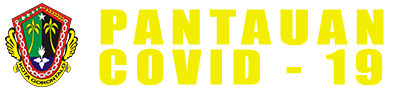
<style>
.page{position:relative;width:405px;height:90px;background:#ffffff}
.page>*{position:absolute;margin:0}
.t1{font:44.2px "Impact";letter-spacing:0.13em;color:#f3ee00;scale:1.31 1}
.t2{font:44.2px "Impact";letter-spacing:0.13em;color:#f3ee00;scale:1.25 1}
</style>
<div class="page">
<p class="t1" style="left:100px;top:9px;width:284px;height:37px">PANTAUAN</p>
<p class="t2" style="left:99px;top:48px;width:284px;height:38px">COVID - 19</p>
</div>
